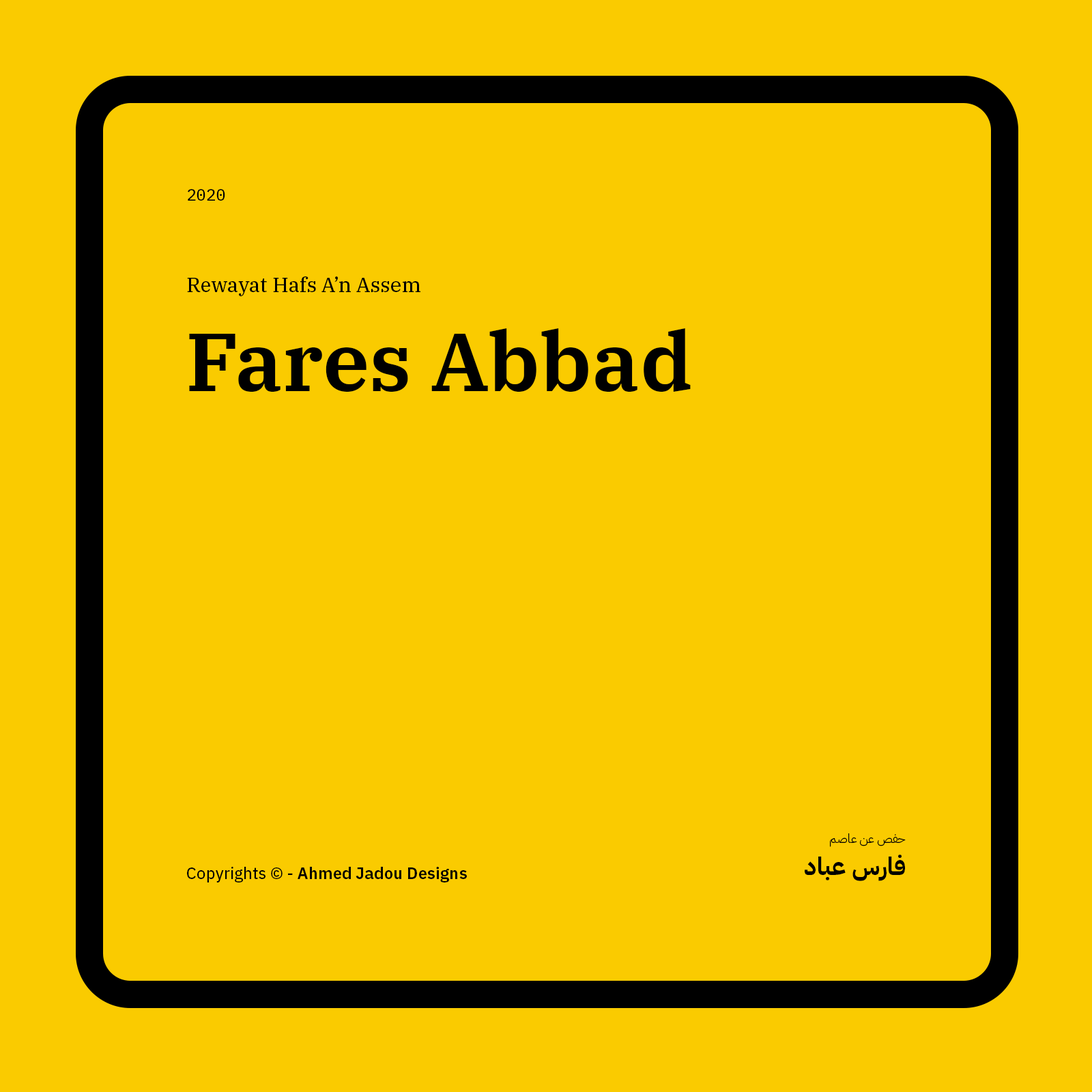
<style>
.page{position:relative;width:1092px;height:1092px;background:#facb00}
.page>*{position:absolute;margin:0}
.t1{font:16.4px "IBMPlexMono-Text";color:#000000}
.t2{font:20.5px "IBMPlexSerif-Text";color:#000000}
.t3{font:81.9px "IBMPlexSerif-SemiBold";color:#000000}
.t4{font:12.3px "IBMPlexArabic-Light";color:#000000}
.t5{font:24.6px "IBMPlexArabic-Bold";color:#000000}
.t6{font:16.4px "IBMPlexSans-SemiBold";color:#000000}
.t7{font:16.4px "IBMPlexSans-Text";color:#000000}
</style>
<div class="page">
<p class="t1" style="left:188px;top:189px;width:37px;height:12px">2020</p>
<p class="t2" style="left:187px;top:276px;width:233px;height:20px">Rewayat Hafs A’n Assem</p>
<p class="t3" style="left:189px;top:328px;width:502px;height:64px">Fares Abbad</p>
<p class="t4" style="left:830px;top:833px;width:76px;height:14px">حفص عن عاصم</p>
<p class="t5" style="left:805px;top:854px;width:100px;height:27px">فارس عباد</p>
<p class="t6" style="left:187px;top:867px;width:280px;height:15px"><span class="t7">Copyrights © - </span>Ahmed Jadou Designs</p>
</div>
